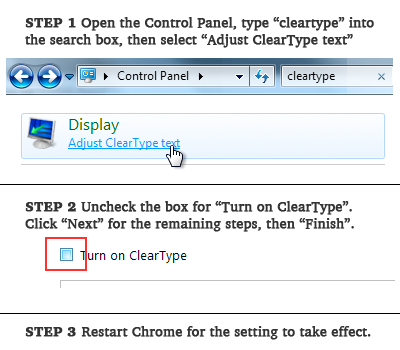
<style>
.page{position:relative;width:400px;height:350px;background:#ffffff}
.page>*{position:absolute;margin:0}
.t1{font:14px "Charter-Roman";color:#333333;font-weight:bold}
.t2{font:14px "Charter-Black";color:#333333;font-weight:bold}
</style>
<div class="page">
<p class="t1" style="left:25px;top:17px;width:349px;height:31px"><span class="t2">STEP 1</span> Open the Control Panel, type “cleartype” into <br>the search box, then select “Adjust ClearType text”</p>
<p class="t1" style="left:25px;top:201px;width:329px;height:31px"><span class="t2">STEP 2</span> Uncheck the box for “Turn on ClearType”. <br>Click “Next” for the remaining steps, then “Finish”.</p>
<p class="t1" style="left:25px;top:326px;width:346px;height:14px"><span class="t2">STEP 3 </span>Restart Chrome for the setting to take effect.</p>
</div>
